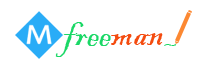
<style>
.page{position:relative;width:210px;height:70px;background:#ffffff}
.page>*{position:absolute;margin:0}
.t1{font:40px "BlackadderITC-Regular";color:#1ad866}
.t2{font:40px "BlackadderITC-Regular";color:#f44b0f}
.t3{font:17.6px "BlackadderITC-Regular";color:#1ad866}
</style>
<div class="page">
<p class="t1" style="left:55px;top:22px;width:108px;height:35px">free<span class="t2">man</span></p>
<p class="t3" style="left:164px;top:44px;width:13px;height:2px">~</p>
</div>
